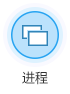
<style>
.page{position:relative;width:70px;height:94px;background:#ffffff}
.page>*{position:absolute;margin:0}
.t1{font:13px "MicrosoftYaHei";color:#323232}
</style>
<div class="page">
<p class="t1" style="left:22px;top:71px;width:26px;height:14px">进程</p>
</div>
